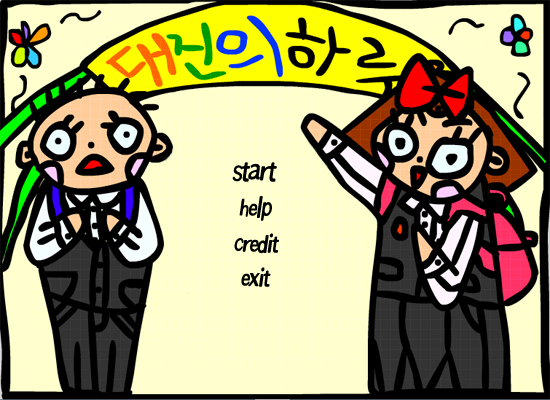
<style>
.page{position:relative;width:550px;height:400px;background:#ffffcd}
.page>*{position:absolute;margin:0}
.t1{font:36px "RixJJanguM";letter-spacing:-0.1em;color:#000000;font-style:italic;scale:0.8 1}
.t2{font:30px "RixJJanguM";letter-spacing:-0.1em;color:#000000;font-style:italic;scale:0.8 1}
</style>
<div class="page">
<p class="t1" style="left:232px;top:162px;width:45px;height:20px">start</p>
<p class="t2" style="left:239px;top:196px;width:33px;height:25px">help</p>
<p class="t2" style="left:234px;top:233px;width:45px;height:21px">credit</p>
<p class="t2" style="left:241px;top:267px;width:30px;height:20px">exit</p>
</div>
